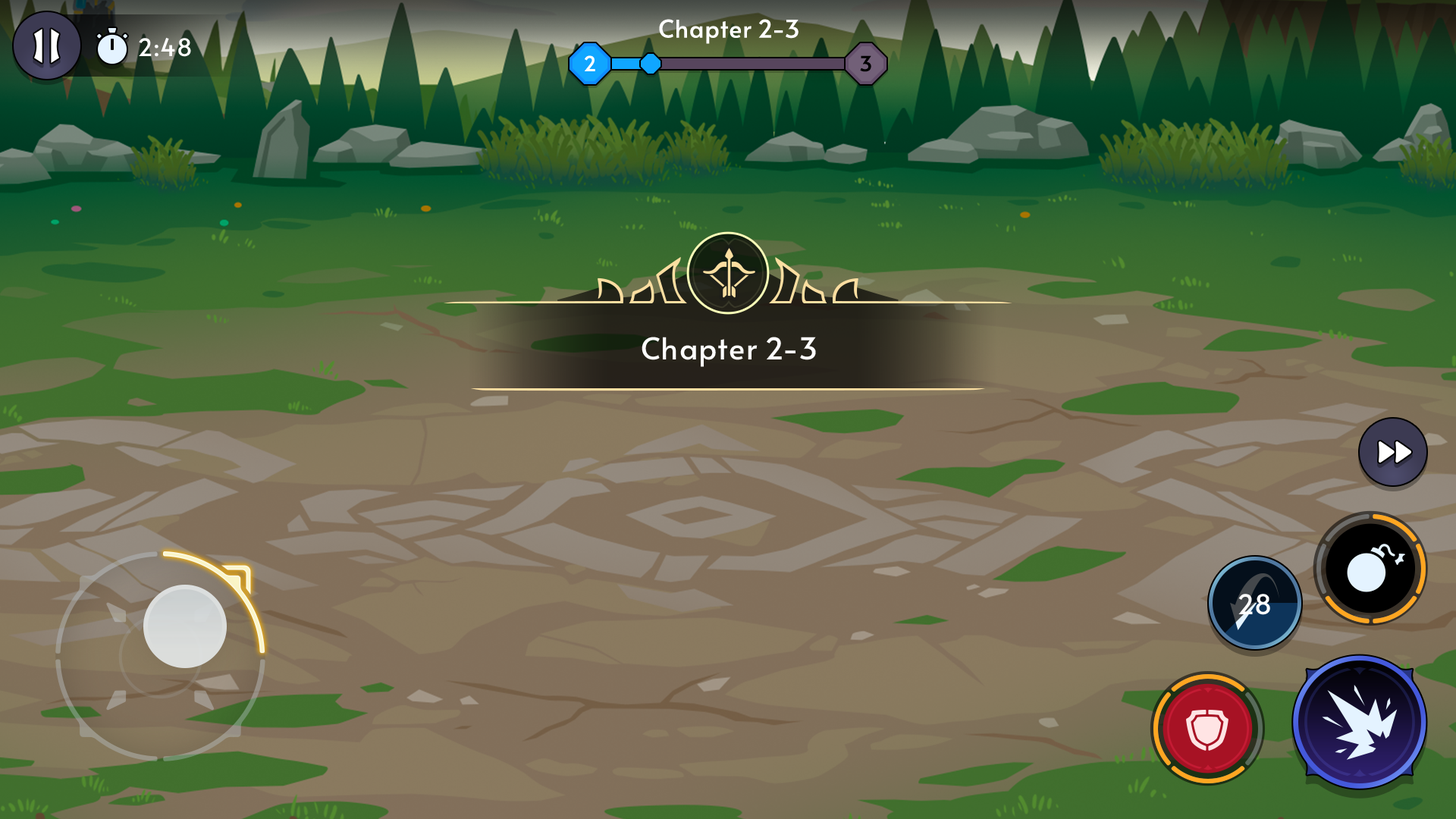
<style>
.page{position:relative;width:1456px;height:819px}
.page>*{position:absolute;margin:0}
.t1{font:24.3px "Alata-Regular";color:#ffffff}
.t2{font:20.5px "Alata-Regular";letter-spacing:-0.025em;color:#ffffff;font-weight:bold}
.t3{font:20.5px "Alata-Regular";letter-spacing:-0.025em;color:#000000;font-weight:bold}
.t4{font:30.3px "Alata-Regular";color:#ffffff}
.t5{font:27.3px "Alata-Regular";color:#ffffff}
</style>
<div class="page">
<p class="t1" style="left:659px;top:19px;width:140px;height:25px">Chapter 2-3</p>
<p class="t1" style="left:139px;top:37px;width:52px;height:20px">2:48</p>
<p class="t2" style="left:584px;top:55px;width:11px;height:16px">2</p>
<p class="t3" style="left:860px;top:55px;width:11px;height:17px">3</p>
<p class="t4" style="left:642px;top:337px;width:174px;height:30px">Chapter 2-3</p>
<p class="t5" style="left:1238px;top:594px;width:32px;height:21px">28</p>
</div>
